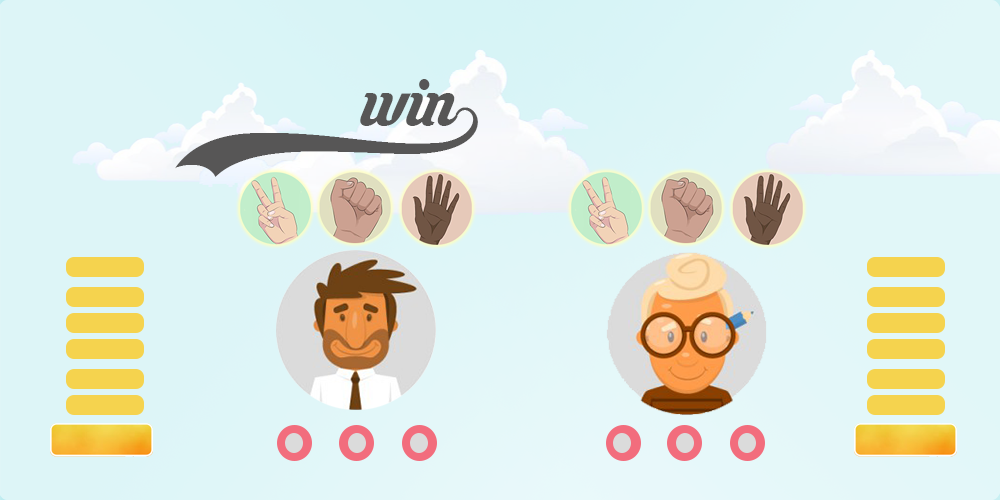
<style>
.page{position:relative;width:1000px;height:500px}
.page>*{position:absolute;margin:0}
.t1{font:83.3px "KrinkesDecorPERSONALUSE";color:#575656}
</style>
<div class="page">
<p class="t1" style="left:175px;top:79px;width:303px;height:98px">win9</p>
</div>
